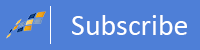
<style>
.page{position:relative;width:200px;height:50px;background:#4e7fd7}
.page>*{position:absolute;margin:0}
.t1{font:30px "Calibri";color:#ffffff}
</style>
<div class="page">
<p class="t1" style="left:72px;top:15px;width:115px;height:20px">Subscribe</p>
</div>
